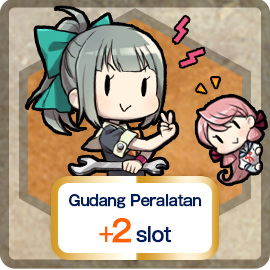
<style>
.page{position:relative;width:270px;height:270px}
.page>*{position:absolute;margin:0}
.t1{font:15px "GothicMB101Pro-Medium";letter-spacing:-0.04em;color:#001d59;font-weight:bold;scale:0.9 1}
.t2{font:20px "GothicMB101Pro-Medium";letter-spacing:-0.04em;color:#ff6000;font-weight:bold;scale:0.9 1}
.t3{font:30px "GothicMB101Pro-Medium";letter-spacing:-0.04em;color:#ff6000;font-weight:bold;scale:0.9 1}
.t4{font:20px "GothicMB101Pro-Medium";letter-spacing:-0.04em;color:#001d59;font-weight:bold;scale:0.9 1}
</style>
<div class="page">
<p class="t1" style="left:69px;top:194px;width:133px;height:49px;text-align:center">Gudang Peralatan<br><span class="t2">+</span><span class="t3">2 </span><span class="t4">slot</span></p>
</div>
